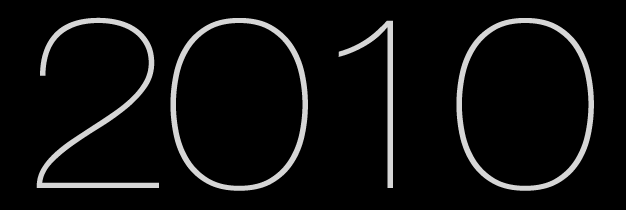
<style>
.page{position:relative;width:626px;height:210px;background:#000000}
.page>*{position:absolute;margin:0}
.t1{font:245.5px "HelveticaNeue-UltraLight";letter-spacing:-0.02em;color:#d6d6d6;scale:1.09 1}
</style>
<div class="page">
<p class="t1" style="left:36px;top:17px;width:558px;height:174px">2010</p>
</div>
